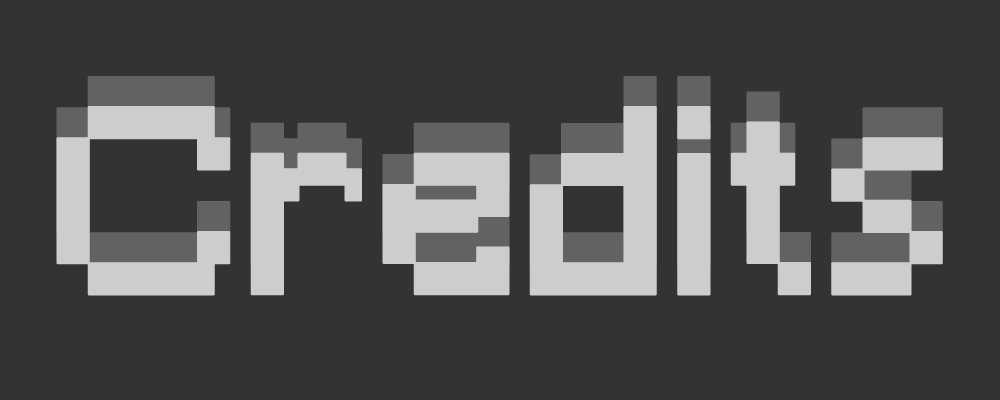
<style>
.page{position:relative;width:1000px;height:400px;background:#333333}
.page>*{position:absolute;margin:0}
.t1{font:250px "Minecraft";color:#cdcdcd;font-weight:bold}
</style>
<div class="page">
<p class="t1" style="left:56px;top:106px;width:887px;height:190px">Credits</p>
</div>
